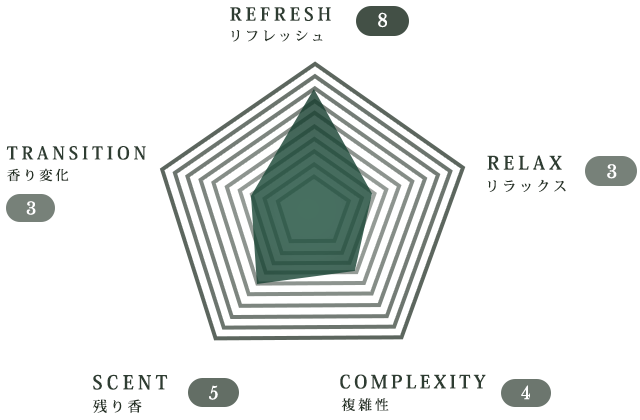
<style>
.page{position:relative;width:640px;height:420px;background:#ffffff}
.page>*{position:absolute;margin:0}
.t1{font:17.9px "KozMinPr6N-Bold";letter-spacing:0.22em;color:#27452e}
.t2{font:17.9px "LibreBaskerville-Regular";letter-spacing:0.06em;color:#ffffff}
.t3{font:13.4px "KozMinPr6N-Medium";letter-spacing:0.22em;color:#253125}
.t4{font:17.5px "KozMinPr6N-Bold";letter-spacing:0.22em;color:#27452e}
.t5{font:18.4px "KozMinPr6N-Bold";letter-spacing:0.22em;color:#27452e}
.t6{font:13.1px "KozMinPr6N-Medium";letter-spacing:0.22em;color:#20381f}
.t7{font:17.7px "LibreBaskerville-Regular";letter-spacing:0.06em;color:#ffffff}
.t8{font:13.8px "KozMinPr6N-Medium";letter-spacing:0.22em;color:#20381f}
.t9{font:16.8px "LibreBaskerville-Regular";letter-spacing:0.06em;color:#ffffff}
.t10{font:18.9px "KozMinPr6N-Bold";letter-spacing:0.22em;color:#27452e}
.t11{font:18.2px "KozMinPr6N-Bold";letter-spacing:0.18em;color:#27452e}
.t12{font:17.4px "LibreBaskerville-Regular";letter-spacing:0.06em;color:#ffffff}
.t13{font:17.1px "LibreBaskerville-Regular";letter-spacing:0.06em;color:#ffffff}
.t14{font:14.2px "KozMinPr6N-Medium";letter-spacing:0.22em;color:#20381f}
.t15{font:13.7px "KozMinPr6N-Medium";letter-spacing:0.22em;color:#253125}
</style>
<div class="page">
<p class="t1" style="left:230px;top:7px;width:101px;height:14px">REFRESH</p>
<p class="t2" style="left:378px;top:12px;width:9px;height:16px">8</p>
<p class="t3" style="left:231px;top:30px;width:92px;height:12px">リフレッシュ</p>
<p class="t4" style="left:6px;top:146px;width:140px;height:14px">TRANSITION</p>
<p class="t5" style="left:487px;top:155px;width:75px;height:15px">RELAX</p>
<p class="t6" style="left:7px;top:168px;width:62px;height:14px">香り変化</p>
<p class="t7" style="left:607px;top:164px;width:10px;height:15px">3</p>
<p class="t8" style="left:488px;top:179px;width:78px;height:13px">リラックス</p>
<p class="t9" style="left:26px;top:201px;width:10px;height:14px">3</p>
<p class="t10" style="left:93px;top:374px;width:75px;height:16px">SCENT</p>
<p class="t11" style="left:340px;top:374px;width:146px;height:15px">COMPLEXITY</p>
<p class="t12" style="left:209px;top:385px;width:9px;height:15px">5</p>
<p class="t13" style="left:521px;top:385px;width:9px;height:15px">4</p>
<p class="t14" style="left:93px;top:399px;width:49px;height:14px">残り香</p>
<p class="t15" style="left:341px;top:398px;width:48px;height:14px">複雑性</p>
</div>
